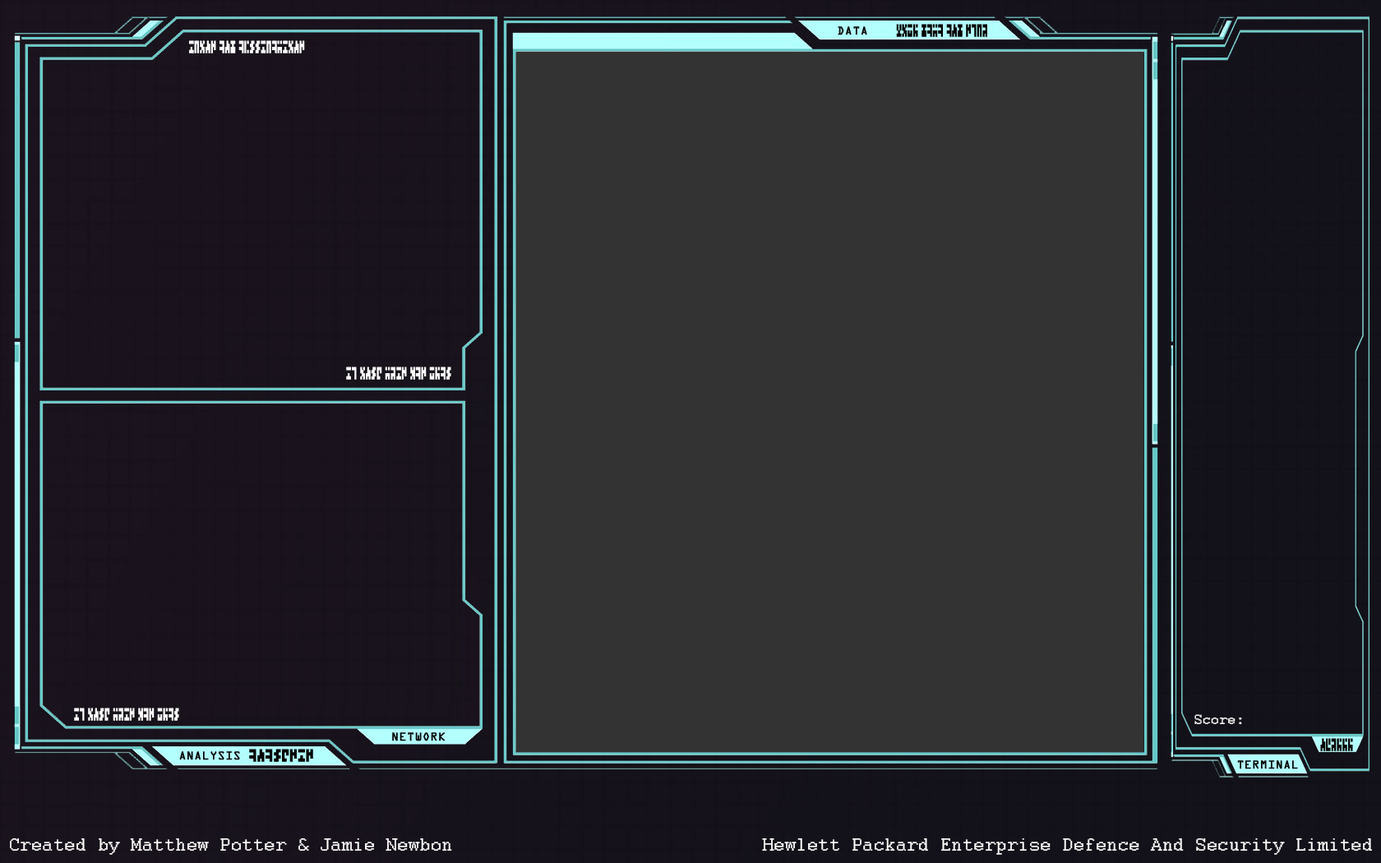
<style>
.page{position:relative;width:1381px;height:863px;background:#333333}
.page>*{position:absolute;margin:0}
.t1{font:14.8px "Courier";color:#ffffff}
.t2{font:19.7px "Courier";color:#ffffff}
</style>
<div class="page">
<p class="t1" style="left:1195px;top:714px;width:47px;height:10px">Score:</p>
<p class="t2" style="left:10px;top:839px;width:442px;height:16px">Created by Matthew Potter &amp; Jamie Newbon</p>
<p class="t2" style="left:762px;top:839px;width:610px;height:16px">Hewlett Packard Enterprise Defence And Security Limited</p>
</div>
